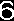
<style>
.page{position:relative;width:14px;height:21px;background:#000000}
.page>*{position:absolute;margin:0}
.t1{font:27.1px "ArialMT";color:#ffffff;scale:1.19 1}
</style>
<div class="page">
<p class="t1" style="left:0px;top:0px;width:15px;height:21px">6</p>
</div>
